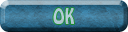
<style>
.page{position:relative;width:128px;height:32px}
.page>*{position:absolute;margin:0}
.t1{font:19.2px "HoboStd";color:#b1c9d5;scale:0.83 1}
</style>
<div class="page">
<p class="t1" style="left:53px;top:8px;width:21px;height:16px">OK</p>
</div>
